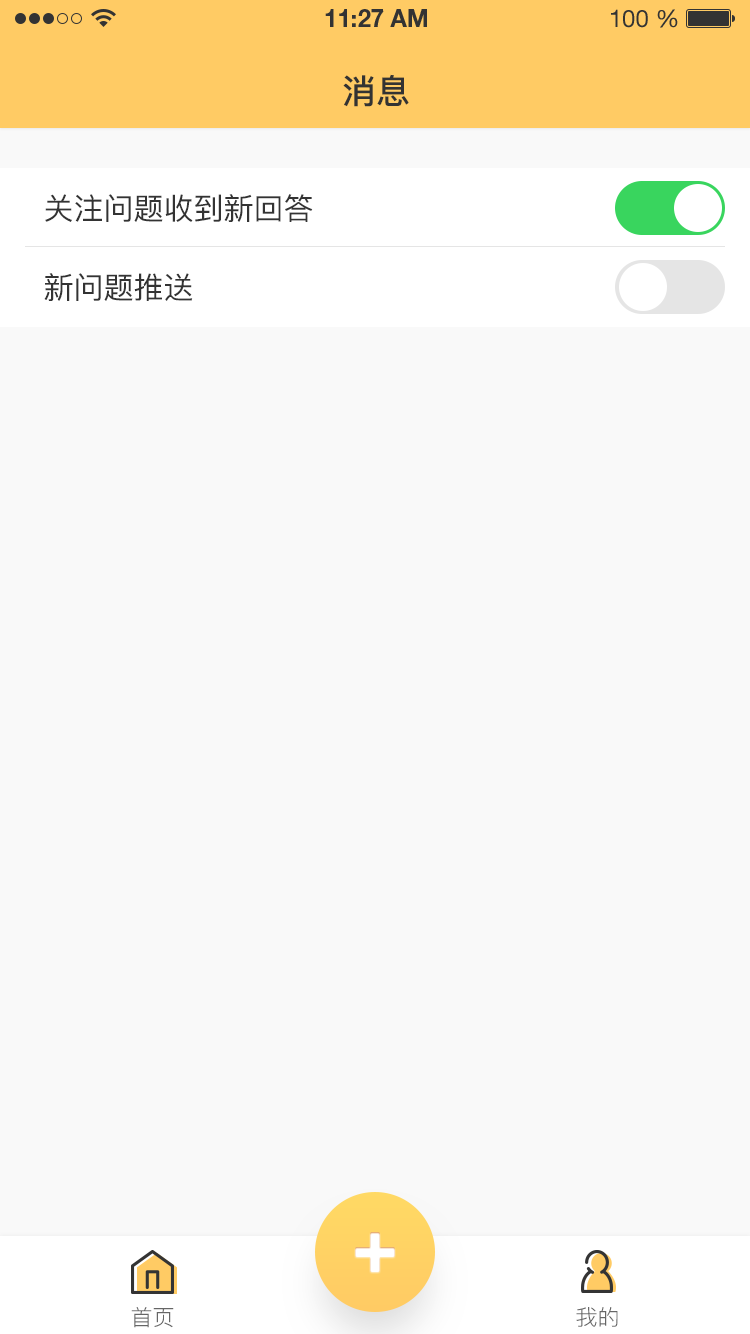
<style>
.page{position:relative;width:750px;height:1334px;background:#f9f9f9}
.page>*{position:absolute;margin:0}
.t1{font:34px "PingFang-SC-Bold";color:#333333;text-transform:uppercase}
.t2{font:30px "PingFang-SC-Medium";color:#333333;text-transform:uppercase}
.t3{font:22px "PingFang-SC-Regular";color:#666666;text-transform:uppercase}
</style>
<div class="page">
<p class="t1" style="left:343px;top:74px;width:66px;height:33px">消息</p>
<p class="t2" style="left:45px;top:194px;width:268px;height:28px">关注问题收到新回答</p>
<p class="t2" style="left:44px;top:273px;width:149px;height:28px">新问题推送</p>
<p class="t3" style="left:131px;top:1307px;width:43px;height:21px">首页</p>
<p class="t3" style="left:576px;top:1307px;width:42px;height:20px">我的</p>
</div>
